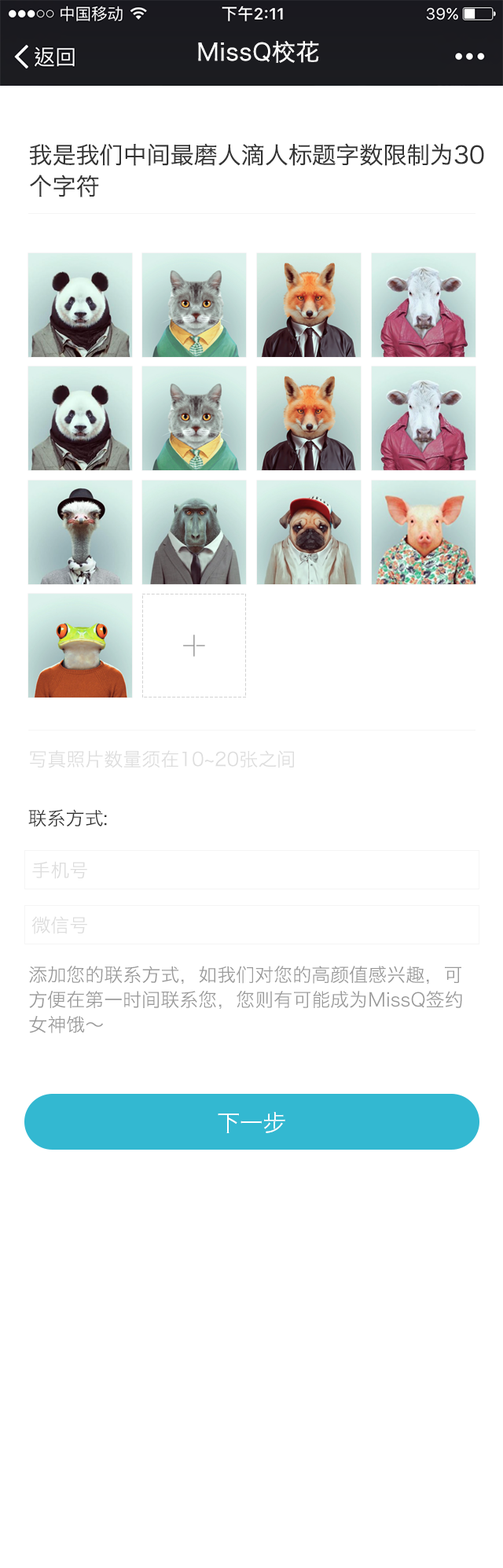
<style>
.page{position:relative;width:503px;height:1568px;background:#ffffff}
.page>*{position:absolute;margin:0}
.t1{font:23.6px "HiraginoSansGB-W3";color:#ffffff;font-weight:bold}
.t2{font:23.6px/31.5px "HiraginoSansGB-W3";color:#333333}
.t3{font:18.9px "HiraginoSansGB-W3";color:#dddddd}
.t4{font:18.9px "HiraginoSansGB-W3";color:#333333}
.t5{font:18.9px/24.9px "HiraginoSansGB-W3";color:#999999}
.t6{font:23.2px "HiraginoSansGB-W3";color:#ffffff}
</style>
<div class="page">
<p class="t1" style="left:198px;top:41px;width:121px;height:22px">MissQ校花</p>
<p class="t2" style="left:30px;top:143px;width:454px;height:54px">我是我们中间最磨人滴人标题字数限制为30<br>个字符</p>
<p class="t3" style="left:30px;top:750px;width:264px;height:18px">写真照片数量须在10~20张之间</p>
<p class="t4" style="left:28px;top:809px;width:79px;height:18px">联系方式:</p>
<p class="t3" style="left:32px;top:861px;width:55px;height:18px">手机号</p>
<p class="t3" style="left:31px;top:916px;width:56px;height:18px">微信号</p>
<p class="t5" style="left:29px;top:966px;width:433px;height:67px">添加您的联系方式，如我们对您的高颜值感兴趣，可<br>方便在第一时间联系您，您则有可能成为MissQ签约<br>女神饿～</p>
<p class="t6" style="left:218px;top:1112px;width:67px;height:21px">下一步</p>
</div>
